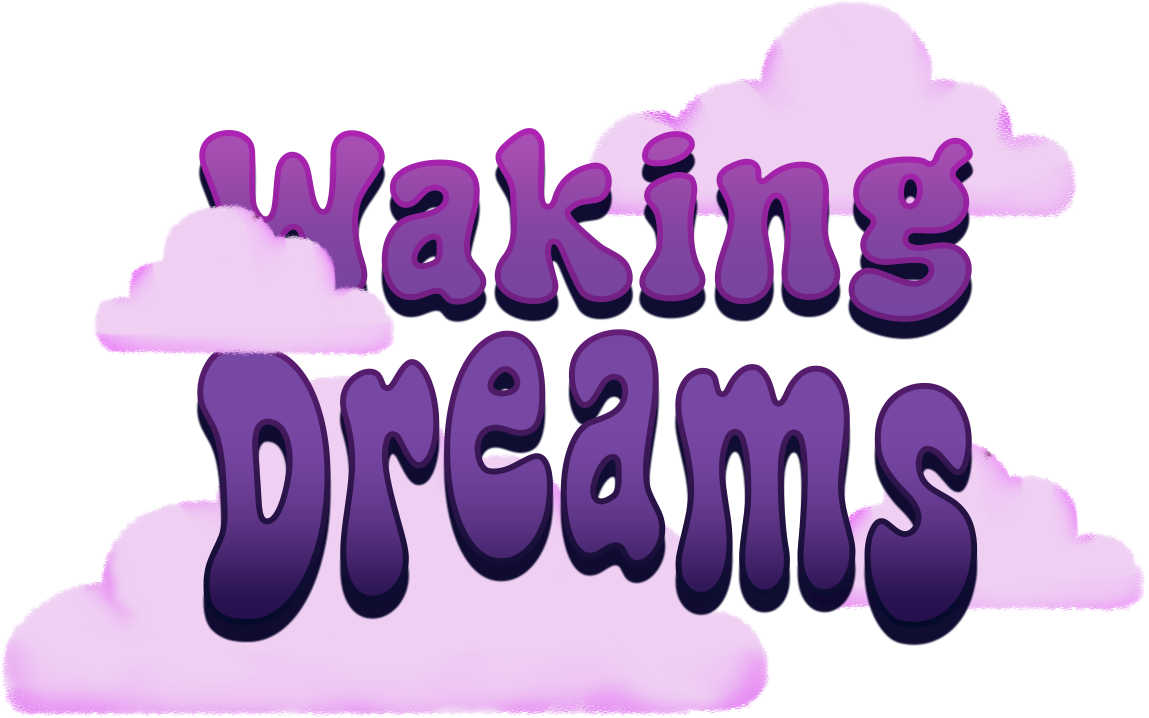
<style>
.page{position:relative;width:1149px;height:718px;background:#ffffff}
.page>*{position:absolute;margin:0}
.t1{font:250px/250px "SuperNugget-Regular"}
.t2{font:407.5px/251px "SuperNugget-Regular";scale:0.61 1}
</style>
<div class="page">
<p class="t1" style="left:197px;top:128px;width:781px;height:500px;text-align:center">Waking<br><span class="t2">Dreams</span></p>
</div>
